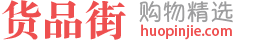
<style>
.page{position:relative;width:253px;height:41px;background:#ffffff}
.page>*{position:absolute;margin:0}
.t1{font:42px "STSongti-SC-Black";color:#ee4f4f}
.t2{font:24px "YuppySC-Regular";color:#9e9e9f}
.t3{font:14px "AdobeHeitiStd-Regular";color:#ee4f4f}
</style>
<div class="page">
<p class="t1" style="left:2px;top:0px;width:124px;height:40px">货品街</p>
<p class="t2" style="left:139px;top:1px;width:94px;height:22px">购物精选</p>
<p class="t3" style="left:141px;top:24px;width:91px;height:16px">huopinjie.com</p>
</div>
